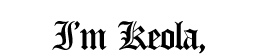
<style>
.page{position:relative;width:259px;height:54px;background:#ffffff}
.page>*{position:absolute;margin:0}
.t1{font:42px "Canterbury-Regular";letter-spacing:-0.04em;color:#000000}
</style>
<div class="page">
<p class="t1" style="left:52px;top:21px;width:154px;height:33px">I’m Keola,</p>
</div>
